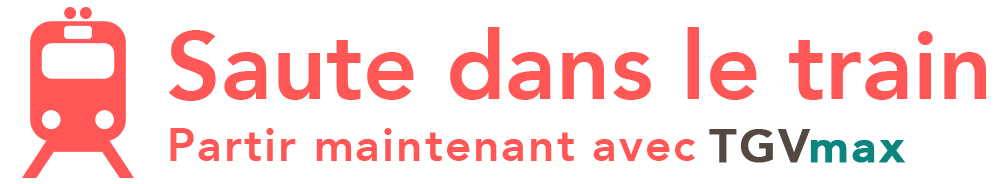
<style>
.page{position:relative;width:1000px;height:184px;background:#ffffff}
.page>*{position:absolute;margin:0}
.t1{font:94.8px "Avenir-Heavy";color:#ff5656}
.t2{font:45.5px "Avenir-Heavy";letter-spacing:0.05em;color:#ff5656}
.t3{font:45.5px "Avenir-Heavy";letter-spacing:0.05em;color:#554742;font-weight:bold}
.t4{font:45.5px "Avenir-Heavy";letter-spacing:0.05em;color:#0b857e;font-weight:bold}
</style>
<div class="page">
<p class="t1" style="left:168px;top:27px;width:818px;height:74px">Saute dans le train</p>
<p class="t2" style="left:170px;top:128px;width:525px;height:33px;text-align:center">Partir maintenant avec<br>\</p>
<p class="t3" style="left:709px;top:129px;width:102px;height:34px">TGV</p>
<p class="t4" style="left:810px;top:140px;width:95px;height:23px">max</p>
</div>
